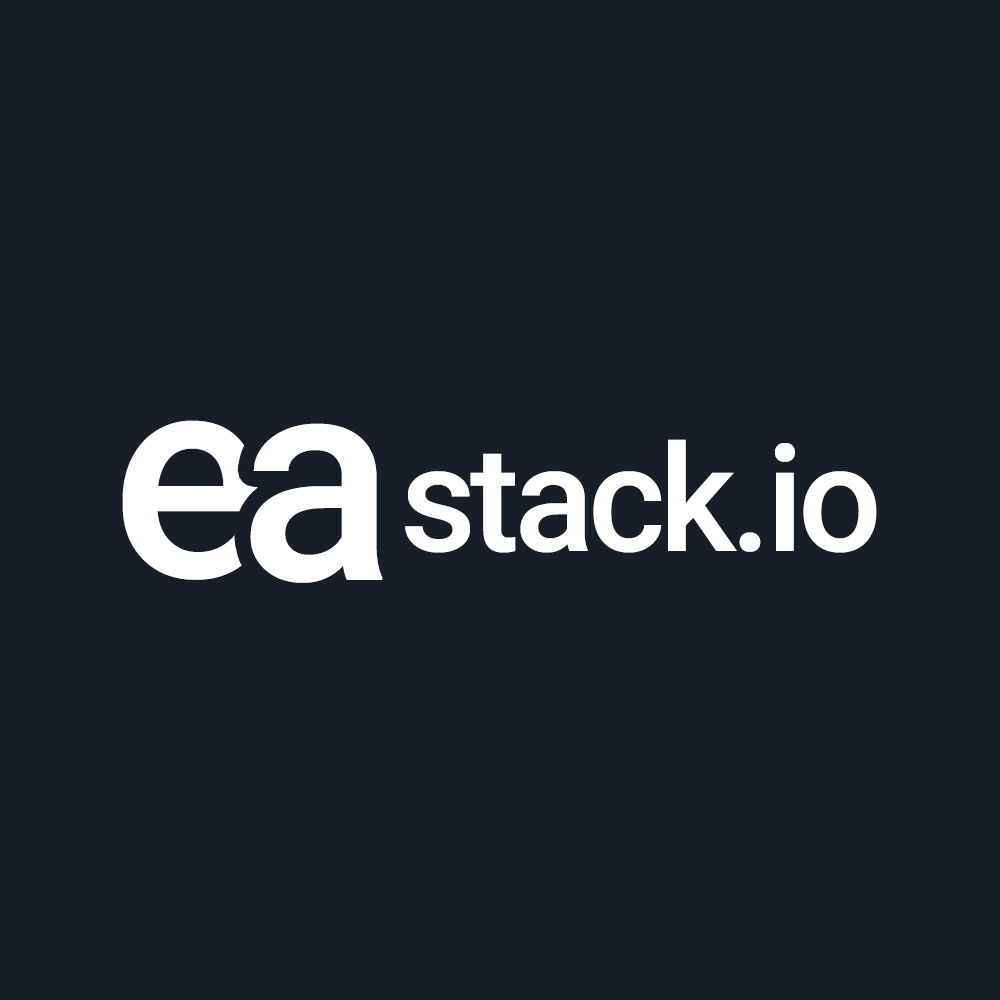
<style>
.page{position:relative;width:1000px;height:1000px;background:#171e27}
.page>*{position:absolute;margin:0}
.t1{font:290.4px "Roboto-Medium";color:#ffffff}
.t2{font:148.2px "Roboto-Medium";letter-spacing:-0.04em;color:#ffffff}
</style>
<div class="page">
<p class="t1" style="left:122px;top:420px;width:136px;height:160px">e</p>
<p class="t1" style="left:250px;top:423px;width:133px;height:160px">a</p>
<p class="t2" style="left:405px;top:439px;width:472px;height:114px">stack.io</p>
</div>
